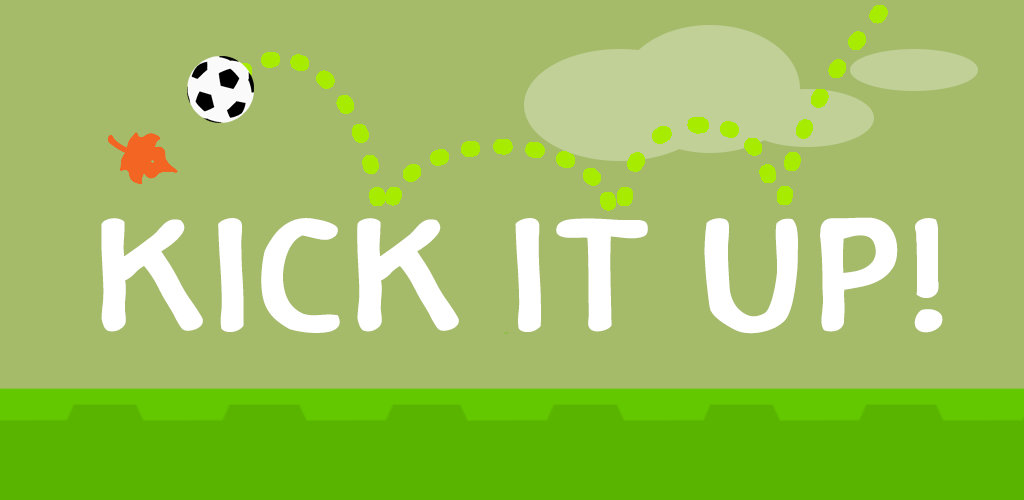
<style>
.page{position:relative;width:1024px;height:500px;background:#a5bb6a}
.page>*{position:absolute;margin:0}
.t1{font:223.8px "Arabica";color:#ffffff}
</style>
<div class="page">
<p class="t1" style="left:101px;top:217px;width:842px;height:117px">Kick it Up!</p>
</div>
